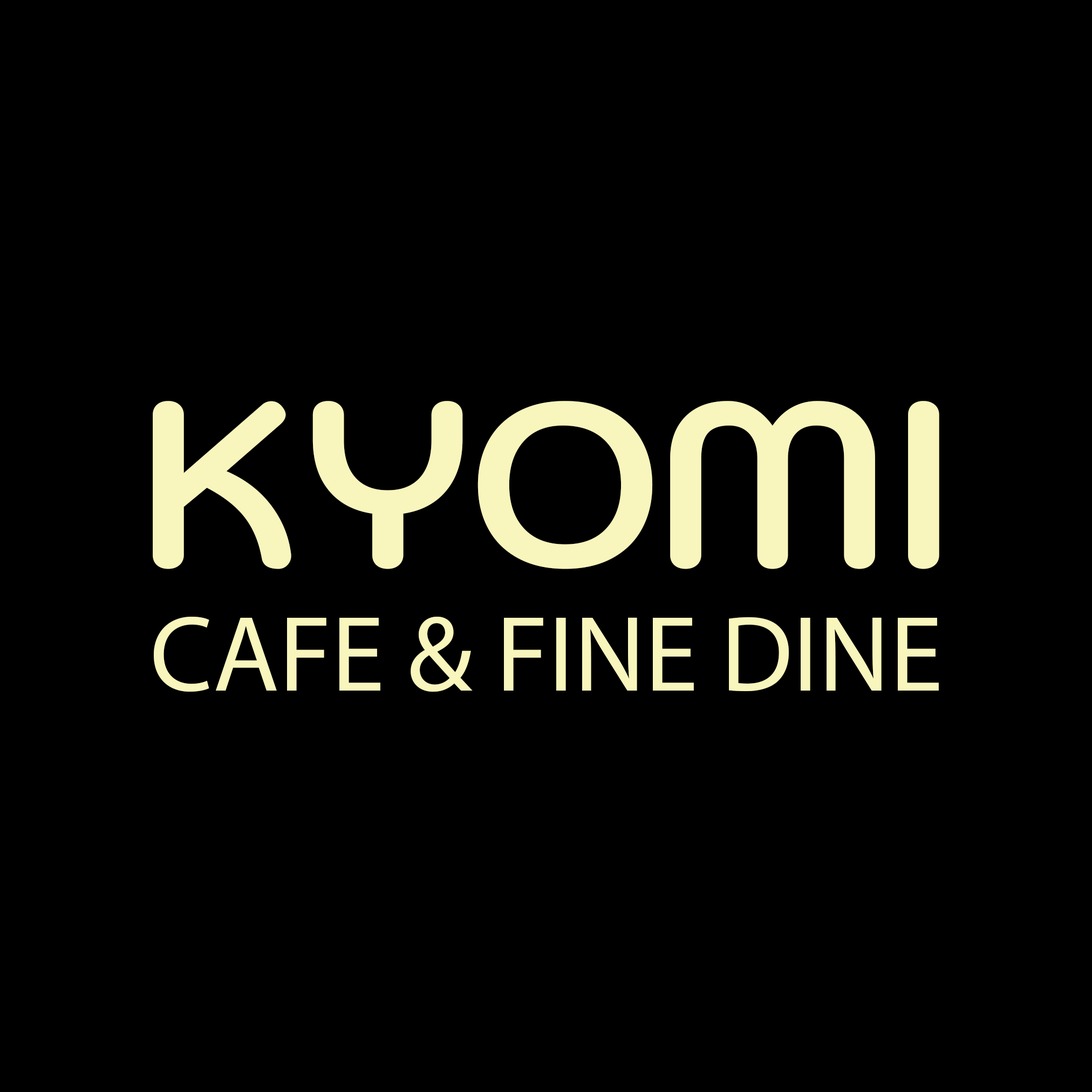
<style>
.page{position:relative;width:1092px;height:1092px;background:#000000}
.page>*{position:absolute;margin:0}
.t1{font:233.1px "Kodchasan-Bold";color:#f8f6bd}
.t2{font:107.9px "MyriadPro-Regular";color:#f8f6bd}
</style>
<div class="page">
<p class="t1" style="left:153px;top:401px;width:786px;height:168px">KYOMI</p>
<p class="t2" style="left:154px;top:617px;width:785px;height:75px">CAFE &amp; FINE DINE</p>
</div>
